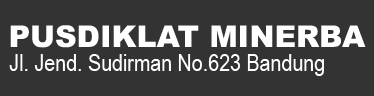
<style>
.page{position:relative;width:374px;height:96px;background:#333333}
.page>*{position:absolute;margin:0}
.t1{font:30px "Arial-Black";color:#ffffff}
.t2{font:24px "ArialNarrow";color:#ffffff}
</style>
<div class="page">
<p class="t1" style="left:10px;top:25px;width:356px;height:23px">PUSDIKLAT MINERBA</p>
<p class="t2" style="left:9px;top:54px;width:315px;height:22px">Jl. Jend. Sudirman No.623 Bandung</p>
</div>
